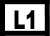
<style>
.page{position:relative;width:50px;height:36px;background:#000000}
.page>*{position:absolute;margin:0}
.t1{font:26px "Arial-Black";color:#000000;scale:0.69 1}
</style>
<div class="page">
<p class="t1" style="left:14px;top:10px;width:21px;height:19px">L1</p>
</div>
